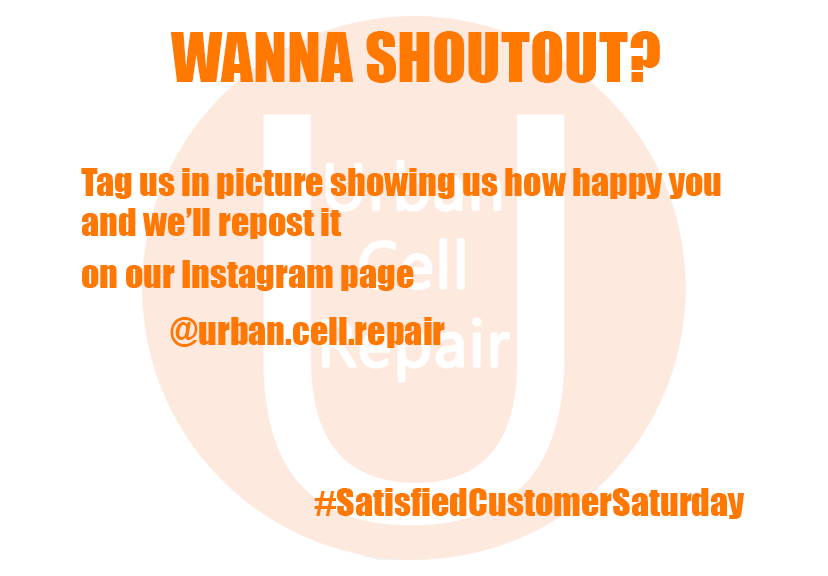
<style>
.page{position:relative;width:828px;height:576px;background:#ffffff}
.page>*{position:absolute;margin:0}
.t1{font:63px "Impact";color:#ff7800}
.t2{font:36px/10px "Impact";color:#ff7800}
.t3{font:36px "Impact";color:#ff7800}
</style>
<div class="page">
<p class="t1" style="left:170px;top:31px;width:490px;height:52px">WANNA SHOUTOUT?</p>
<p class="t2" style="left:81px;top:168px;width:640px;height:123px">Tag us in picture showing us how happy you <br><br><br><br>and we’ll repost it <br><span class="t3">on our Instagram page</span></p>
<p class="t3" style="left:170px;top:317px;width:275px;height:31px">@urban.cell.repair</p>
<p class="t3" style="left:314px;top:488px;width:431px;height:31px">#SatisfiedCustomerSaturday</p>
</div>
